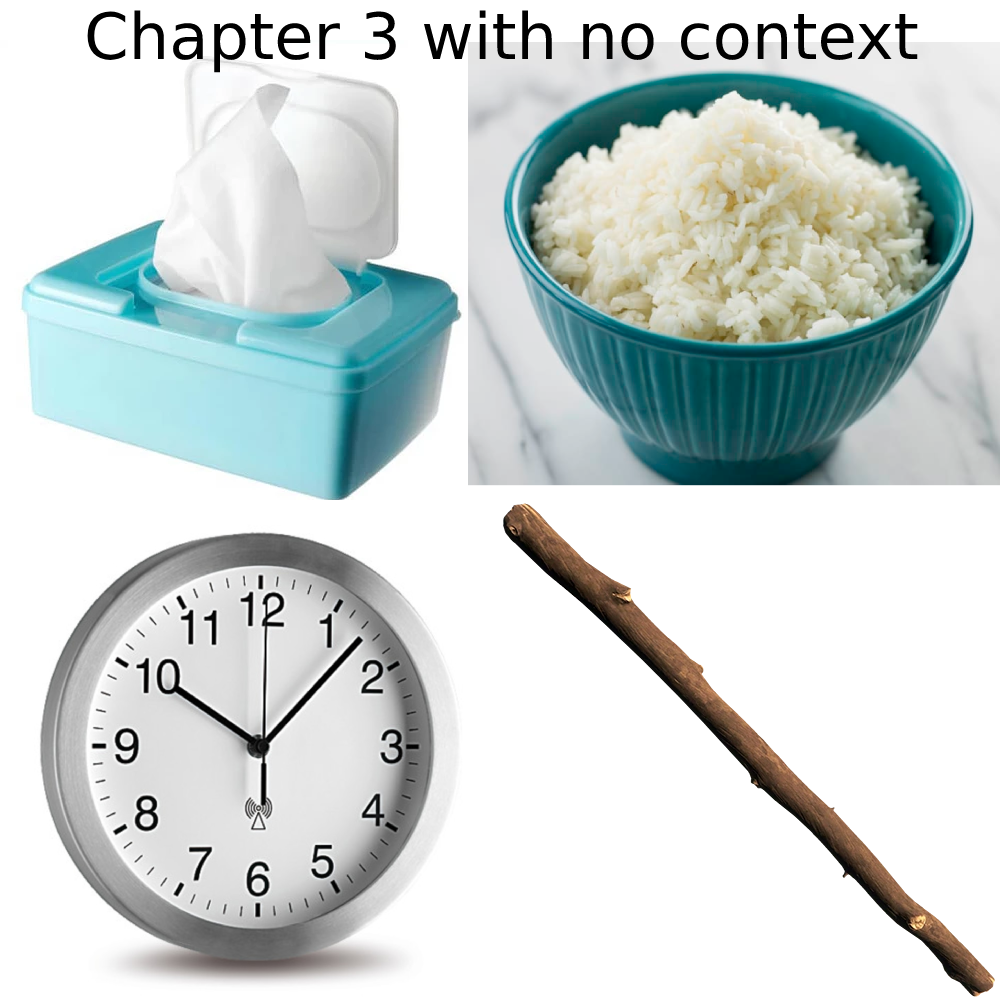
<style>
.page{position:relative;width:1000px;height:1000px;background:#ffffff}
.page>*{position:absolute;margin:0}
.t1{font:64px "DejaVuSans";color:#000000}
</style>
<div class="page">
<p class="t1" style="left:87px;top:10px;width:831px;height:63px">Chapter 3 with no context</p>
</div>
